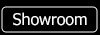
<style>
.page{position:relative;width:100px;height:35px;background:#000000}
.page>*{position:absolute;margin:0}
.t1{font:16px "Tahoma";color:#ffffff}
</style>
<div class="page">
<p class="t1" style="left:13px;top:12px;width:74px;height:14px">Showroom</p>
</div>
